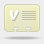
<style>
.page{position:relative;width:44px;height:44px;background:#eeeeee}
.page>*{position:absolute;margin:0}
.t1{font:18px "Aller-BoldItalic";letter-spacing:-0.025em;color:#ffffff}
</style>
<div class="page">
<p class="t1" style="left:9px;top:10px;width:10px;height:10px">v</p>
</div>
